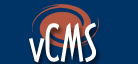
<style>
.page{position:relative;width:138px;height:64px;background:#003366}
.page>*{position:absolute;margin:0}
.t1{font:48px "Arcitectura";color:#ffffff}
</style>
<div class="page">
<p class="t1" style="left:29px;top:22px;width:67px;height:41px">vCMS</p>
</div>
